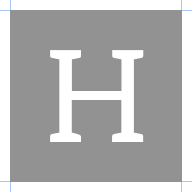
<style>
.page{position:relative;width:192px;height:192px;background:#929292}
.page>*{position:absolute;margin:0}
.t1{font:128px "Aleo-Regular";color:#ffffff}
</style>
<div class="page">
<p class="t1" style="left:50px;top:50px;width:94px;height:92px">H</p>
</div>
